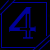
<style>
.page{position:relative;width:50px;height:50px;background:#000000}
.page>*{position:absolute;margin:0}
.t1{font:37.5px "ABitEmpty";color:#000099}
</style>
<div class="page">
<p class="t1" style="left:9px;top:7px;width:27px;height:32px">4</p>
</div>
